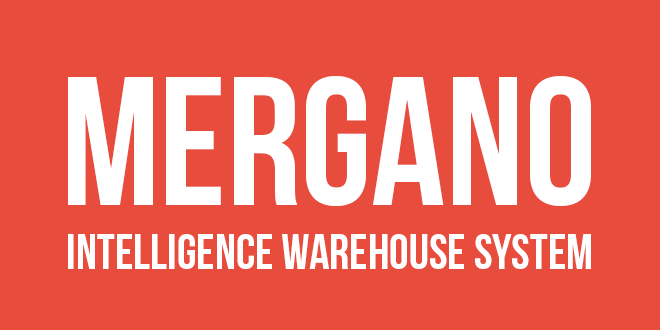
<style>
.page{position:relative;width:660px;height:330px;background:#e74c3c}
.page>*{position:absolute;margin:0}
.t1{font:182.8px "BebasNeue";color:#ffffff}
.t2{font:50px "BebasNeue";color:#ffffff}
</style>
<div class="page">
<p class="t1" style="left:68px;top:76px;width:523px;height:130px">Mergano</p>
<p class="t2" style="left:68px;top:234px;width:523px;height:35px">INTELLIGENCE WAREHOUSE SYSTEM</p>
</div>
